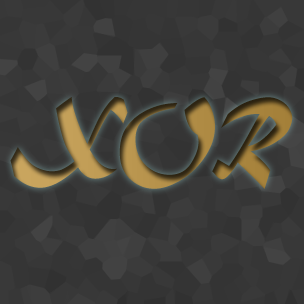
<style>
.page{position:relative;width:304px;height:304px}
.page>*{position:absolute;margin:0}
.t1{font:100px "MaturaMTScriptCapitals";letter-spacing:-0.075em;scale:0.85 1}
</style>
<div class="page">
<p class="t1" style="left:10px;top:97px;width:283px;height:92px">XOR</p>
</div>
